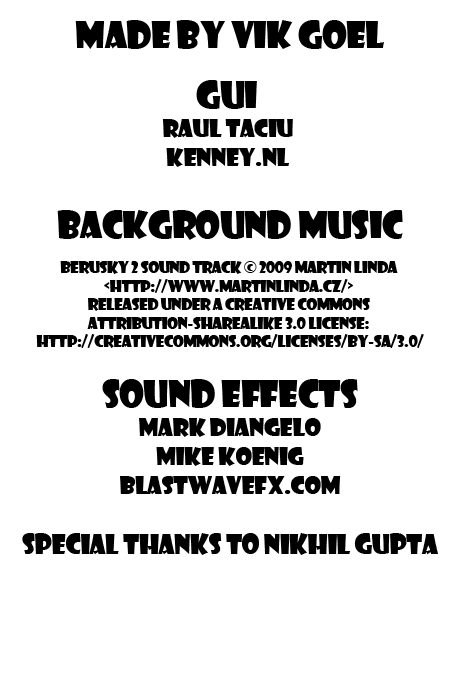
<style>
.page{position:relative;width:450px;height:700px;background:#ffffff}
.page>*{position:absolute;margin:0}
.t1{font:15.5px "ShowcardGothic-Reg";letter-spacing:-0.02em;color:#000000}
.t2{font:36px "ShowcardGothic-Reg";letter-spacing:-0.02em;color:#000000}
.t3{font:24px "ShowcardGothic-Reg";letter-spacing:-0.02em;color:#000000}
.t4{font:26px "ShowcardGothic-Reg";letter-spacing:-0.02em;color:#000000}
</style>
<div class="page">
<p class="t1" style="left:22px;top:20px;width:416px;height:535px;text-align:center"><span class="t2">Made By Vik Goel<br><br>GUI <br></span><span class="t3">Raul Taciu <br>Kenney.nl <br><br></span><span class="t2">Background Music<br><br></span>Berusky 2 Sound Track © 2009 Martin Linda <br>&lt;http://www.martinlinda.cz/&gt; <br>released under a Creative Commons <br>Attribution-ShareAlike 3.0 license: <br>http://creativecommons.org/licenses/by-sa/3.0/<br><br><span class="t2">Sound Effects<br></span><span class="t3">Mark DiAngelo<br>Mike Koenig<br>Blastwavefx.com<br><br></span><span class="t4">Special Thanks to Nikhil Gupta</span></p>
</div>
